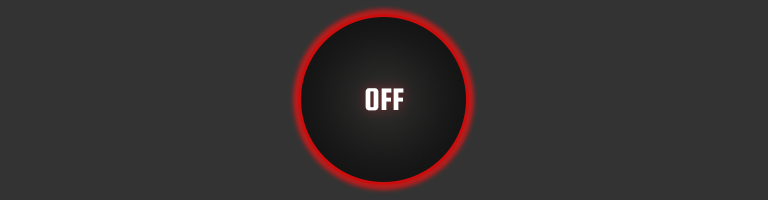
<style>
.page{position:relative;width:768px;height:200px;background:#333333}
.page>*{position:absolute;margin:0}
.t1{font:33.3px "SquadaOne-Regular";color:#ffffff}
</style>
<div class="page">
<p class="t1" style="left:365px;top:88px;width:39px;height:23px">OFF</p>
</div>
